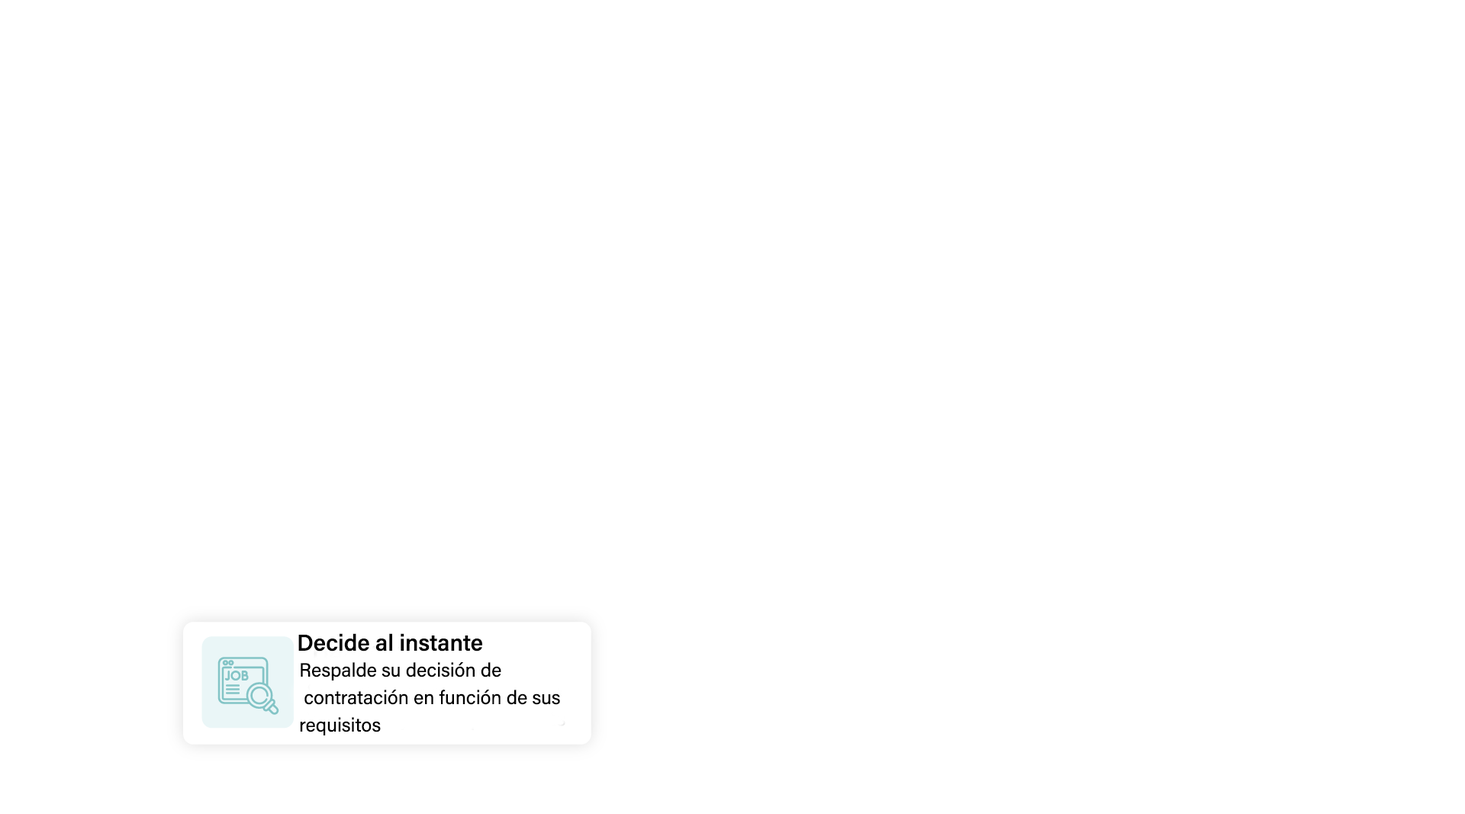
<style>
.page{position:relative;width:1465px;height:814px;background:#ffffff}
.page>*{position:absolute;margin:0}
.t1{font:22.9px "AcuminConcept_578.000wght";color:#000000}
.t2{font:19.1px/13.7px "AcuminConcept-Regular";color:#000000}
</style>
<div class="page">
<p class="t1" style="left:298px;top:633px;width:184px;height:19px">Decide al instante</p>
<p class="t2" style="left:300px;top:662px;width:260px;height:73px">Respalde su decisión de<br><br> contratación en función de sus <br><br>requisitos</p>
</div>
